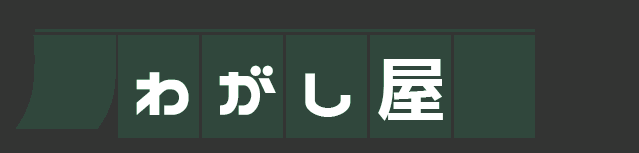
<style>
.page{position:relative;width:639px;height:153px;background:#333433}
.page>*{position:absolute;margin:0}
.t1{font:72px "NicoKaku";letter-spacing:0.025em;color:#ffffff}
</style>
<div class="page">
<p class="t1" style="left:219px;top:65px;width:57px;height:50px">が</p>
<p class="t1" style="left:378px;top:59px;width:65px;height:62px">屋</p>
<p class="t1" style="left:136px;top:72px;width:53px;height:43px">わ</p>
<p class="t1" style="left:305px;top:73px;width:46px;height:44px">し</p>
</div>
